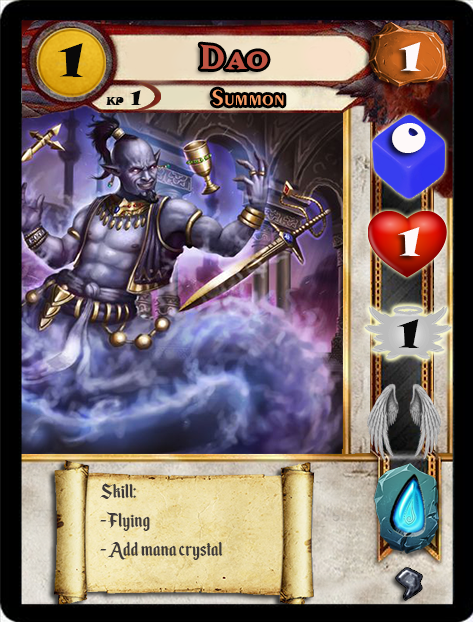
<style>
.page{position:relative;width:473px;height:622px}
.page>*{position:absolute;margin:0}
.t1{font:46.6px "SnapITC-Regular";color:#090909;scale:1.05 1}
.t2{font:40px "MatrixBoldSmallCaps";color:#c25443;scale:1.06 1}
.t3{font:40px "SnapITC-Regular";color:#fef9f9;scale:1.05 1}
.t4{font:22.7px "Exotic350BT-DemiBold";color:#f89c64;scale:1.06 1}
.t5{font:20.5px "SnapITC-Regular";color:#090909}
.t6{font:40px "SnapITC-Regular";color:#090909;scale:1.05 1}
.t7{font:24px "EnchantedLand";color:#3e3939}
</style>
<div class="page">
<p class="t1" style="left:58px;top:43px;width:25px;height:34px">1</p>
<p class="t2" style="left:200px;top:44px;width:68px;height:26px">Dao</p>
<p class="t3" style="left:399px;top:42px;width:22px;height:29px">1</p>
<p class="t4" style="left:212px;top:89px;width:72px;height:17px">Summon</p>
<p class="t5" style="left:130px;top:90px;width:11px;height:15px">1</p>
<p class="t3" style="left:392px;top:123px;width:34px;height:30px">0</p>
<p class="t3" style="left:398px;top:227px;width:22px;height:29px">1</p>
<p class="t6" style="left:397px;top:319px;width:22px;height:29px">1</p>
<p class="t7" style="left:100px;top:483px;width:123px;height:77px">Skill:<br>- Flying<br>- Add mana crystal</p>
</div>
